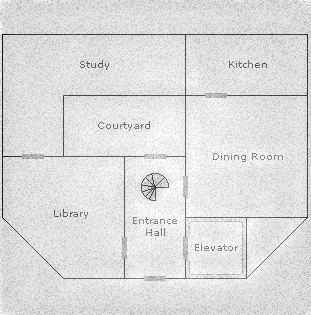
<style>
.page{position:relative;width:311px;height:315px}
.page>*{position:absolute;margin:0}
.t1{font:10px "Verdana"}
.t2{font:10px "Verdana";color:#868686}
.t3{font:10px "Verdana";color:#838383}
</style>
<div class="page">
<p class="t1" style="left:80px;top:60px;width:29px;height:10px">Study</p>
<p class="t1" style="left:229px;top:60px;width:38px;height:8px">Kitchen</p>
<p class="t1" style="left:98px;top:121px;width:52px;height:10px">Courtyard</p>
<p class="t2" style="left:213px;top:153px;width:70px;height:9px">Dining Room</p>
<p class="t1" style="left:54px;top:209px;width:34px;height:10px">Library</p>
<p class="t2" style="left:133px;top:217px;width:44px;height:19px;text-align:center">Entrance<br>Hall</p>
<p class="t3" style="left:195px;top:243px;width:43px;height:8px">Elevator</p>
</div>
